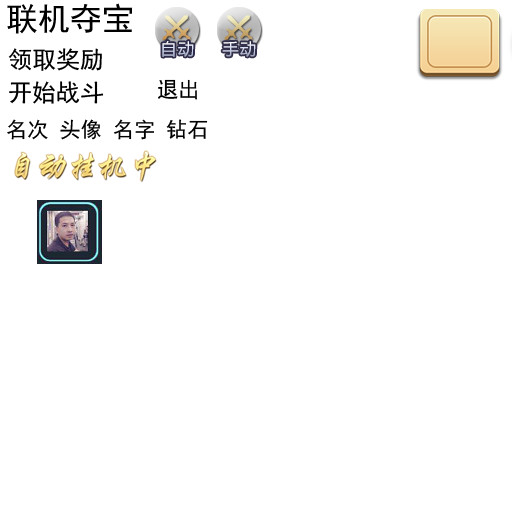
<style>
.page{position:relative;width:512px;height:512px;background:#ffffff}
.page>*{position:absolute;margin:0}
.t1{font:32px "SimHei";color:#000000}
.t2{font:24px "SimHei";color:#000000}
.t3{font:21.3px "SimHei";color:#000000}
</style>
<div class="page">
<p class="t1" style="left:7px;top:3px;width:126px;height:31px">联机夺宝</p>
<p class="t2" style="left:8px;top:48px;width:94px;height:23px">领取奖励</p>
<p class="t2" style="left:9px;top:81px;width:95px;height:23px">开始战斗</p>
<p class="t3" style="left:158px;top:79px;width:39px;height:21px">退出</p>
<p class="t3" style="left:7px;top:119px;width:201px;height:21px">名次 头像 名字 钻石</p>
</div>
